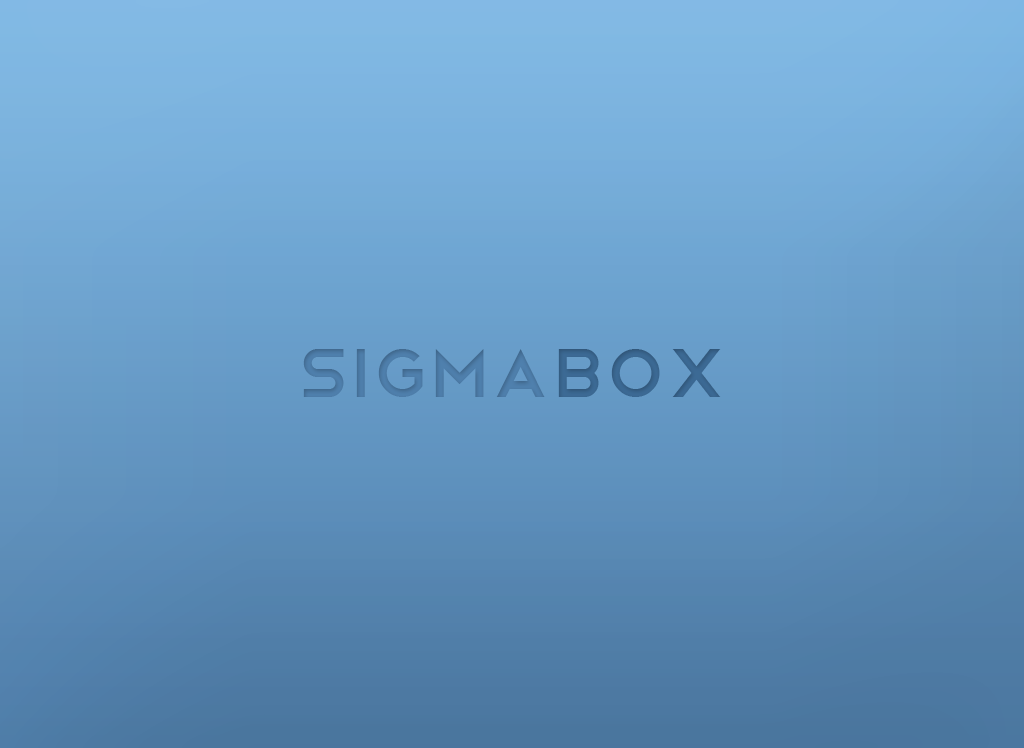
<style>
.page{position:relative;width:1024px;height:748px}
.page>*{position:absolute;margin:0}
.t1{font:88.9px "Telegrafico";color:#4f80ad}
.t2{font:88.9px "Telegrafico";color:#3c6a95}
</style>
<div class="page">
<p class="t1" style="left:303px;top:349px;width:418px;height:48px">Sigma<span class="t2">box</span></p>
</div>
